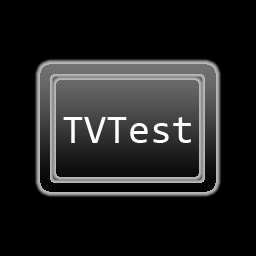
<style>
.page{position:relative;width:256px;height:256px;background:#000000}
.page>*{position:absolute;margin:0}
.t1{font:40px "Consolas";color:#ffffff}
</style>
<div class="page">
<p class="t1" style="left:63px;top:117px;width:128px;height:26px">TVTest</p>
</div>
